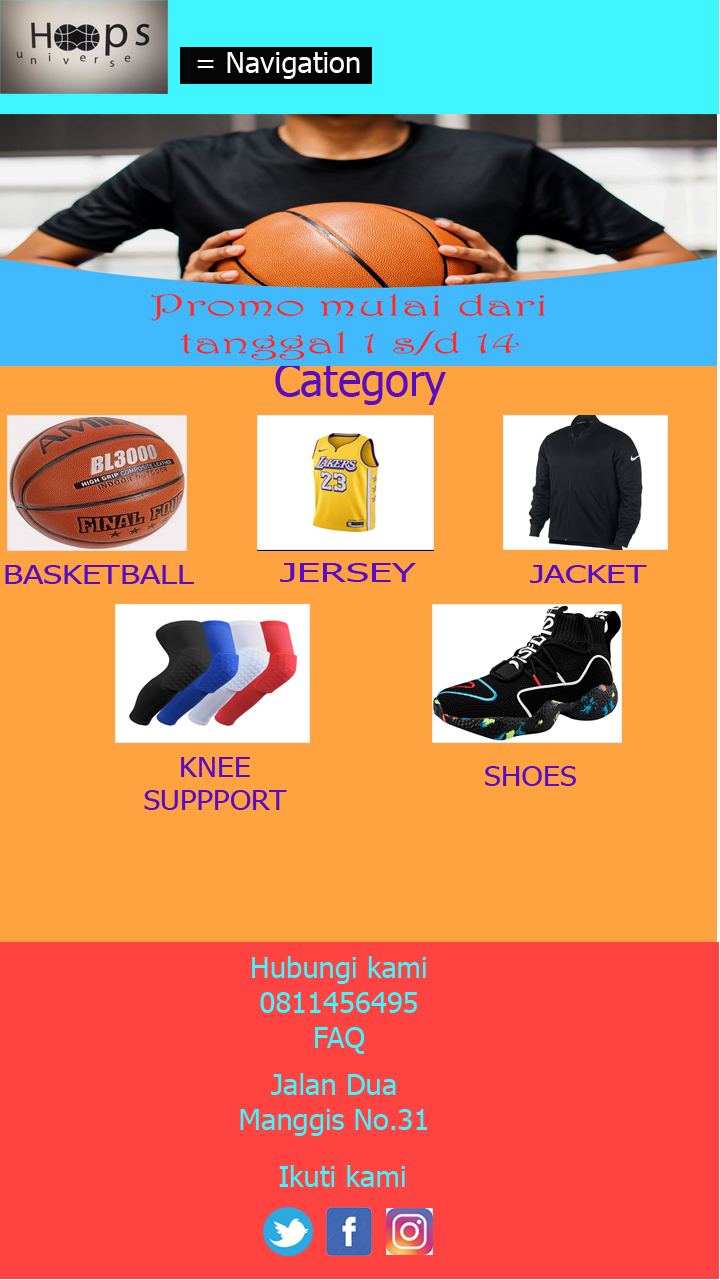
<style>
.page{position:relative;width:720px;height:1280px;background:#ffa340}
.page>*{position:absolute;margin:0}
.t1{font:29.2px "Tahoma";color:#ffffff}
.t2{font:43.8px "Tahoma";color:#570cc7}
.t3{font:25.5px "Tahoma";color:#570cc7;scale:1.32 1}
.t4{font:24.6px "Tahoma";color:#570cc7;scale:1.68 1}
.t5{font:24.1px "Tahoma";color:#570cc7;scale:1.45 1}
.t6{font:27.6px "Tahoma";color:#570cc7;scale:1.09 1}
.t7{font:27.1px "Tahoma";color:#570cc7;scale:1.12 1}
.t8{font:29.2px "Tahoma";color:#40f5ff}
</style>
<div class="page">
<p class="t1" style="left:197px;top:52px;width:163px;height:27px">= Navigation</p>
<p class="t2" style="left:275px;top:363px;width:171px;height:42px">Category</p>
<p class="t3" style="left:5px;top:565px;width:189px;height:19px">BASKETBALL</p>
<p class="t4" style="left:280px;top:563px;width:136px;height:19px">JERSEY</p>
<p class="t5" style="left:530px;top:565px;width:117px;height:18px">JACKET</p>
<p class="t6" style="left:144px;top:757px;width:143px;height:53px;text-align:center">KNEE SUPPPORT</p>
<p class="t7" style="left:485px;top:766px;width:91px;height:20px">SHOES</p>
<p class="t8" style="left:252px;top:956px;width:174px;height:98px;text-align:center">Hubungi kami<br>0811456495<br>FAQ</p>
<p class="t8" style="left:240px;top:1073px;width:187px;height:63px;text-align:center">Jalan Dua Manggis No.31</p>
<p class="t8" style="left:279px;top:1165px;width:126px;height:22px">Ikuti kami</p>
</div>
